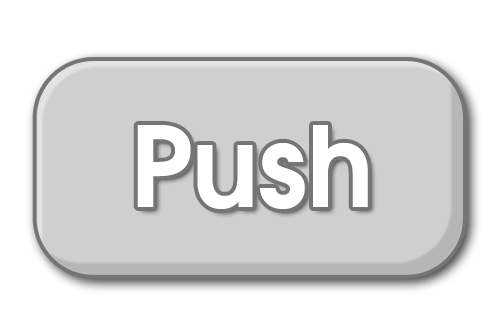
<style>
.page{position:relative;width:500px;height:332px;background:#ffffff}
.page>*{position:absolute;margin:0}
.t1{font:110.6px "AvantGarde-Demi";color:#ffffff}
</style>
<div class="page">
<p class="t1" style="left:137px;top:125px;width:231px;height:84px">Push</p>
</div>
